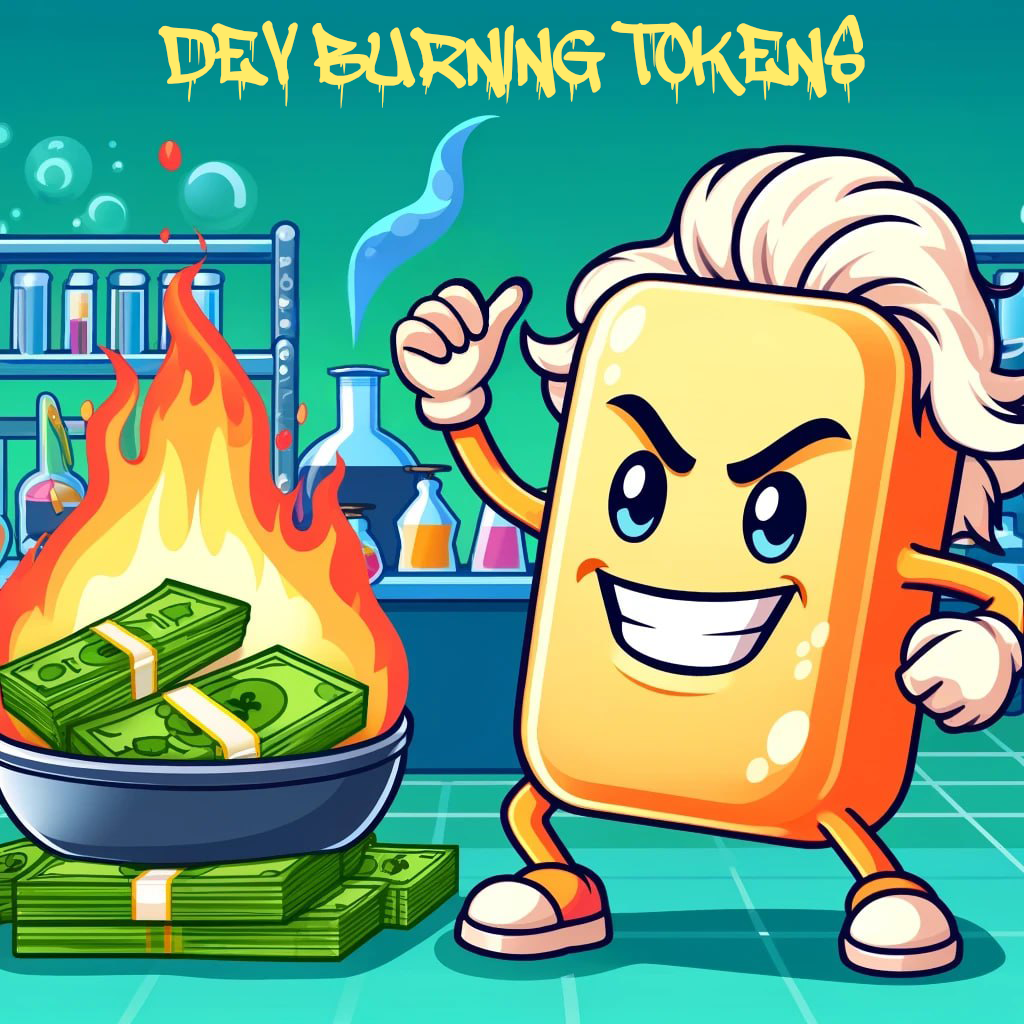
<style>
.page{position:relative;width:1024px;height:1024px}
.page>*{position:absolute;margin:0}
.t1{font:102.7px "adrippingmarker";color:#ffeb68}
</style>
<div class="page">
<p class="t1" style="left:158px;top:14px;width:707px;height:95px">DEV BURNING TOKENS</p>
</div>
